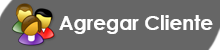
<style>
.page{position:relative;width:220px;height:50px;background:#666666}
.page>*{position:absolute;margin:0}
.t1{font:20px "CenturyGothic-Bold";color:#ffffff}
</style>
<div class="page">
<p class="t1" style="left:59px;top:15px;width:154px;height:19px">Agregar Cliente</p>
</div>
